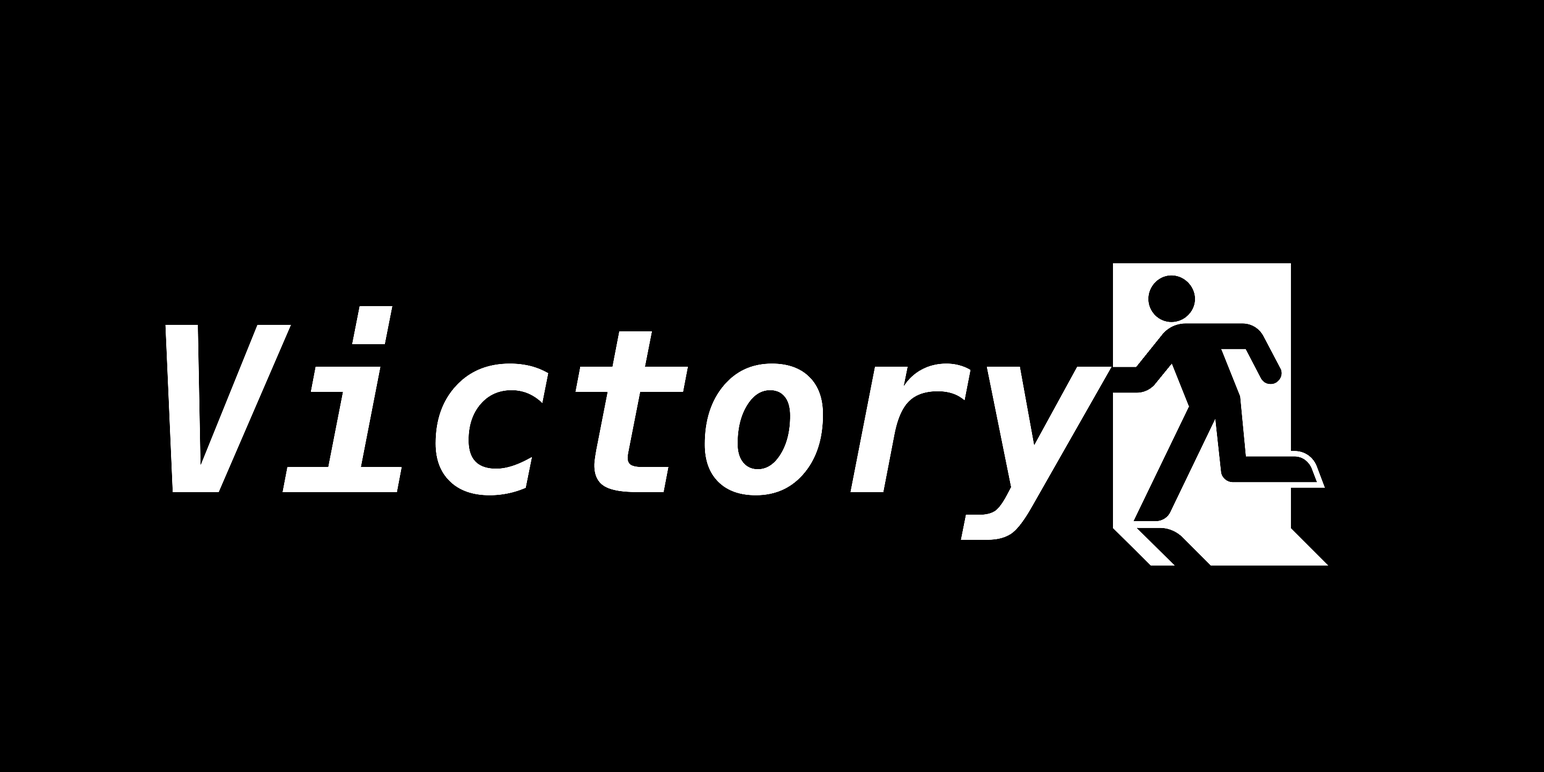
<style>
.page{position:relative;width:1544px;height:772px;background:#000000}
.page>*{position:absolute;margin:0}
.t1{font:229.3px "Menlo-BoldItalic";color:#ffffff}
</style>
<div class="page">
<p class="t1" style="left:165px;top:306px;width:947px;height:234px">Victory</p>
</div>
